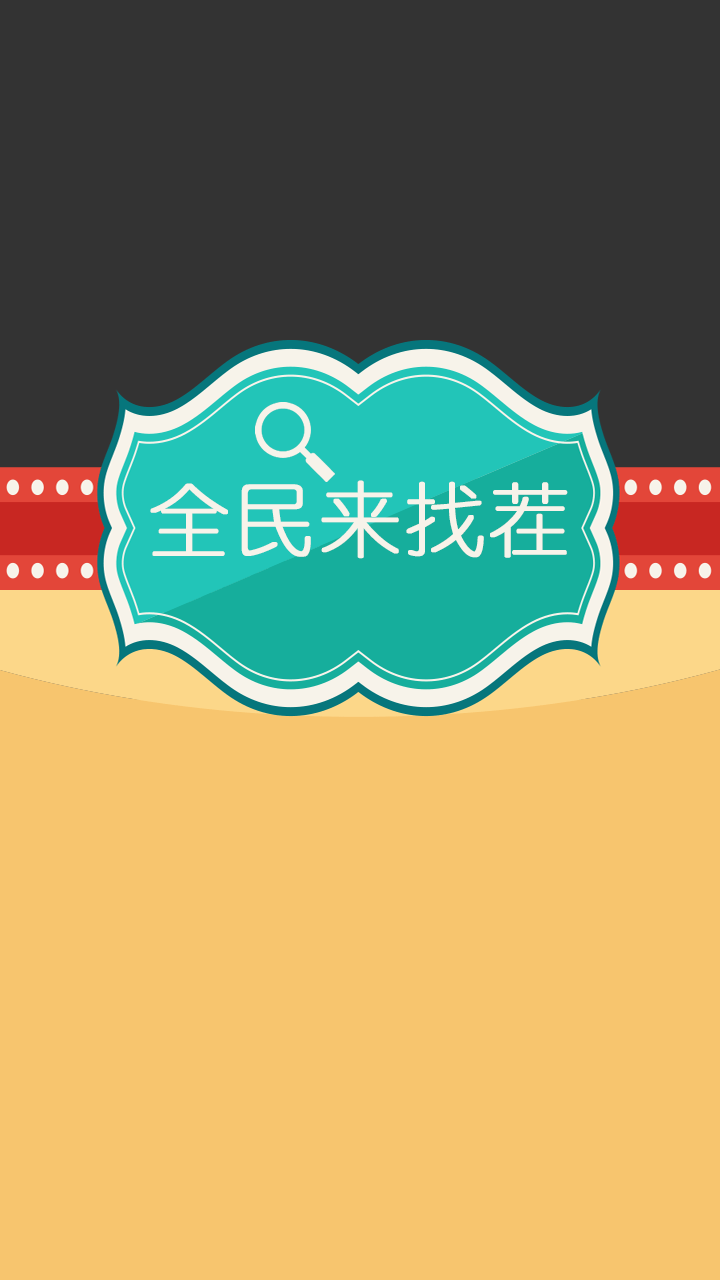
<style>
.page{position:relative;width:720px;height:1280px;background:#f7c56e}
.page>*{position:absolute;margin:0}
.t1{font:80px "YouYuan";letter-spacing:0.04em;color:#f7f3ea;font-weight:bold}
</style>
<div class="page">
<p class="t1" style="left:150px;top:480px;width:418px;height:79px">全民来找茬</p>
</div>
